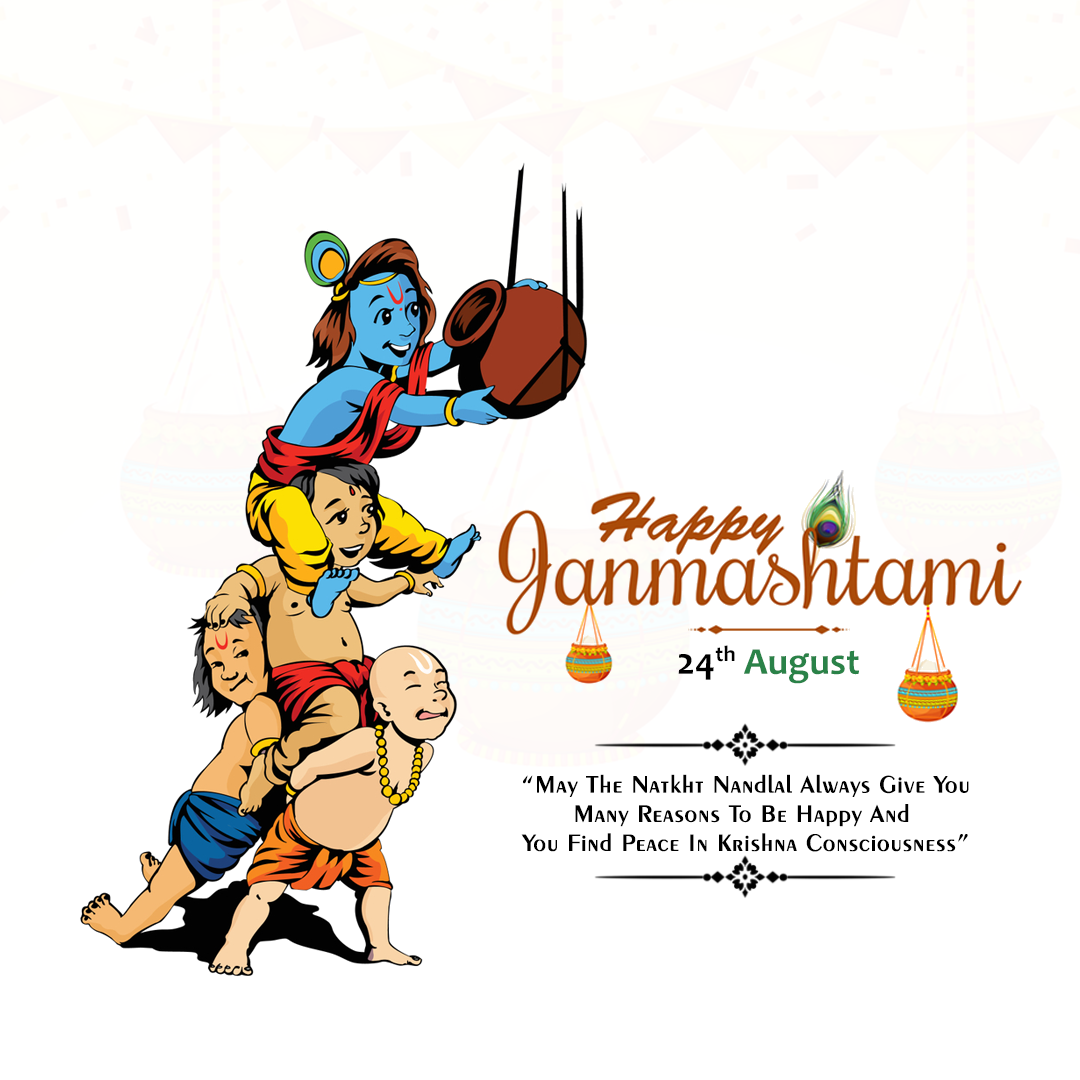
<style>
.page{position:relative;width:1080px;height:1080px;background:#ffffff}
.page>*{position:absolute;margin:0}
.t1{font:38.1px "Candara-Bold";color:#2a8248}
.t2{font:38.1px "Candara-Bold";color:#000000}
.t3{font:24.9px/29.2px "Exotic350BT-DemiBold";letter-spacing:0.001em;color:#000000;font-weight:bold;scale:1.03 1}
</style>
<div class="page">
<p class="t1" style="left:678px;top:645px;width:181px;height:39px"><span class="t2">24th </span>August</p>
<p class="t3" style="left:521px;top:774px;width:448px;height:78px;text-align:center">“May The Natkht Nandlal Always Give You<br>Many Reasons To Be Happy And <br>You Find Peace In Krishna Consciousness”</p>
</div>
